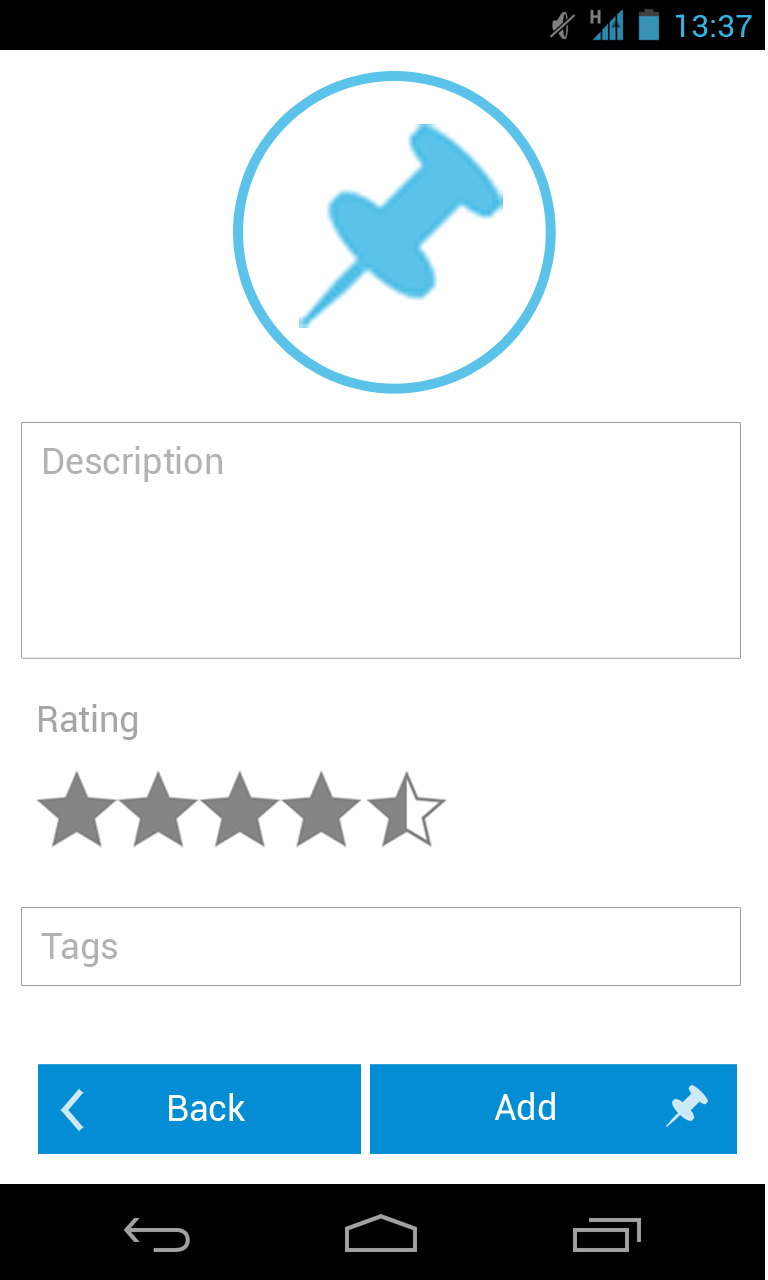
<style>
.page{position:relative;width:768px;height:1280px;background:#ffffff}
.page>*{position:absolute;margin:0}
.t1{font:35.6px "Roboto-Regular";color:#b2b2b2}
.t2{font:35.6px "Roboto-Regular";color:#a6a6a6}
.t3{font:35.6px "Roboto-Regular";color:#ffffff}
</style>
<div class="page">
<p class="t1" style="left:44px;top:446px;width:178px;height:36px">Description</p>
<p class="t2" style="left:39px;top:704px;width:98px;height:36px">Rating</p>
<p class="t1" style="left:41px;top:933px;width:76px;height:34px">Tags</p>
<p class="t3" style="left:169px;top:1093px;width:76px;height:28px">Back</p>
<p class="t3" style="left:494px;top:1092px;width:61px;height:28px">Add</p>
</div>
